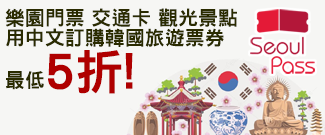
<style>
.page{position:relative;width:325px;height:135px;background:#f6f6f4}
.page>*{position:absolute;margin:0}
.t1{font:20px/20px "DFNHei-W9-WINP-BF";color:#2a2b00}
.t2{font:48px/20px "DFNHei-W9-WINP-BF";color:#af0000}
</style>
<div class="page">
<p class="t1" style="left:5px;top:8px;width:232px;height:86px">樂園門票 交通卡 觀光景點<br>用中文訂購韓國旅遊票券<br>最低<span class="t2">5折!</span></p>
</div>
